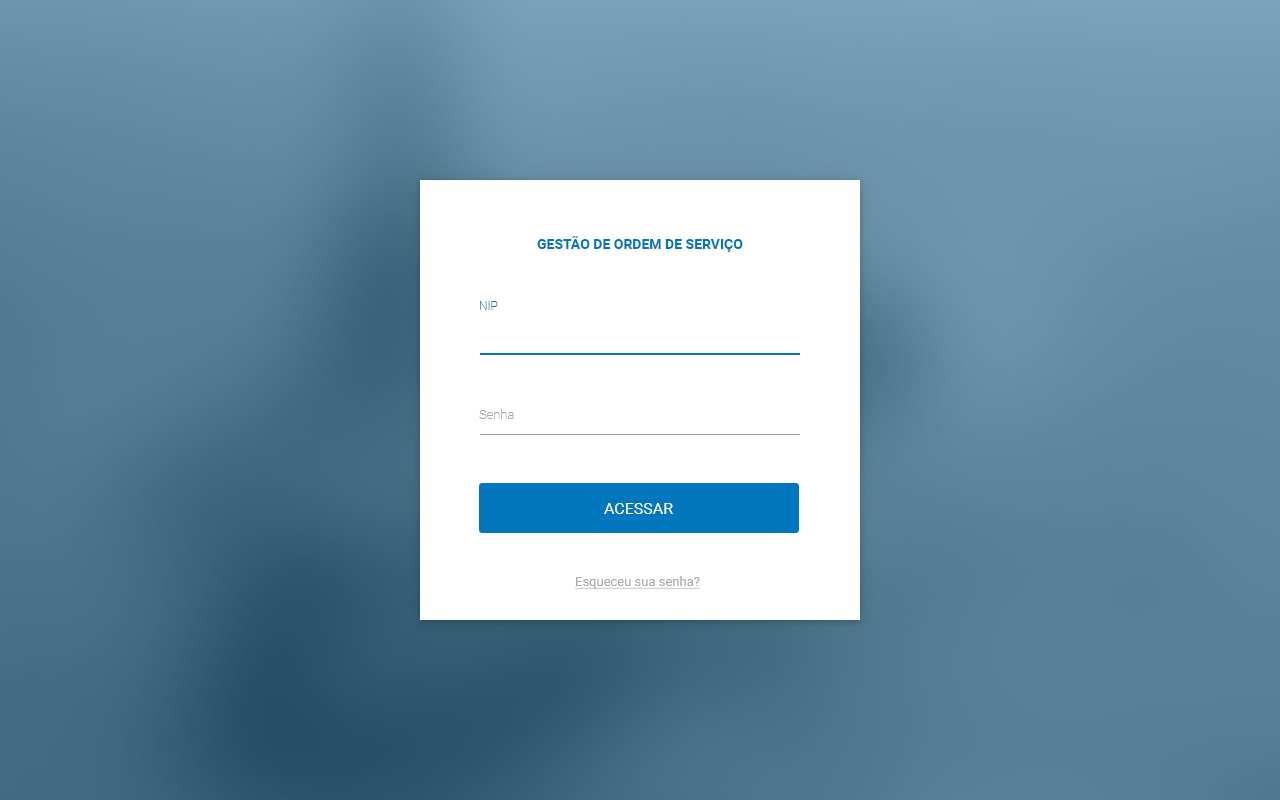
<style>
.page{position:relative;width:1280px;height:800px}
.page>*{position:absolute;margin:0}
.t1{font:14px "Roboto-Bold";color:#0277bd;text-transform:uppercase}
.t2{font:12px "Roboto-Thin";color:#0277bd}
.t3{font:13px "Roboto-Thin";color:#a7a7a7}
.t4{font:16px "Roboto-Regular";color:#ffffff}
.t5{font:13px "Roboto-Regular";color:#ababab;text-decoration:underline}
</style>
<div class="page">
<p class="t1" style="left:537px;top:236px;width:206px;height:16px">Gestão de ordem de serviço</p>
<p class="t2" style="left:480px;top:301px;width:18px;height:9px">NIP</p>
<p class="t3" style="left:479px;top:409px;width:35px;height:10px">Senha</p>
<p class="t4" style="left:604px;top:503px;width:69px;height:11px">ACESSAR</p>
<p class="t5" style="left:575px;top:576px;width:125px;height:13px">Esqueceu sua senha?</p>
</div>
